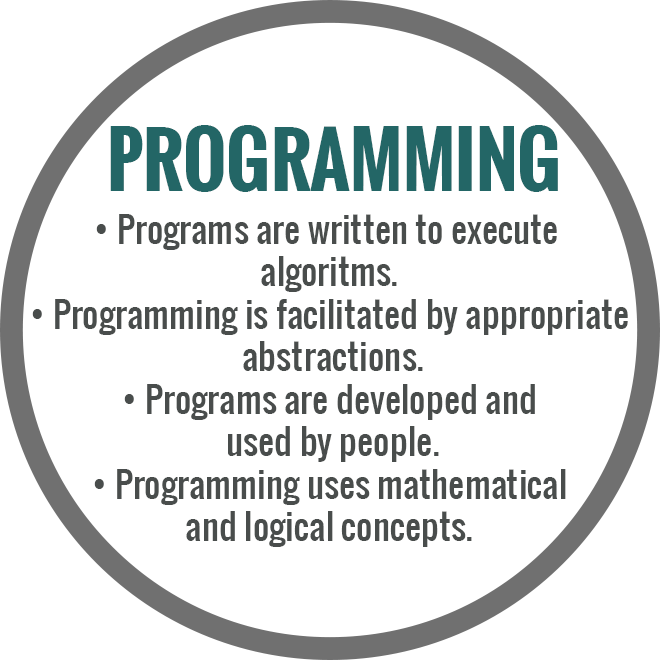
<style>
.page{position:relative;width:660px;height:660px;background:#ffffff}
.page>*{position:absolute;margin:0}
.t1{font:72.9px "Oswald-Bold";color:#236666}
.t2{font:35.4px "Oswald-Regular";color:#494d4c}
</style>
<div class="page">
<p class="t1" style="left:110px;top:125px;width:448px;height:67px">PROGRAMMING</p>
<p class="t2" style="left:32px;top:214px;width:596px;height:333px;text-align:center">• Programs are written to execute <br>algoritms.<br>• Programming is facilitated by appropriate<br> abstractions.<br>• Programs are developed and<br> used by people.<br>• Programming uses mathematical<br>and logical concepts.</p>
</div>
